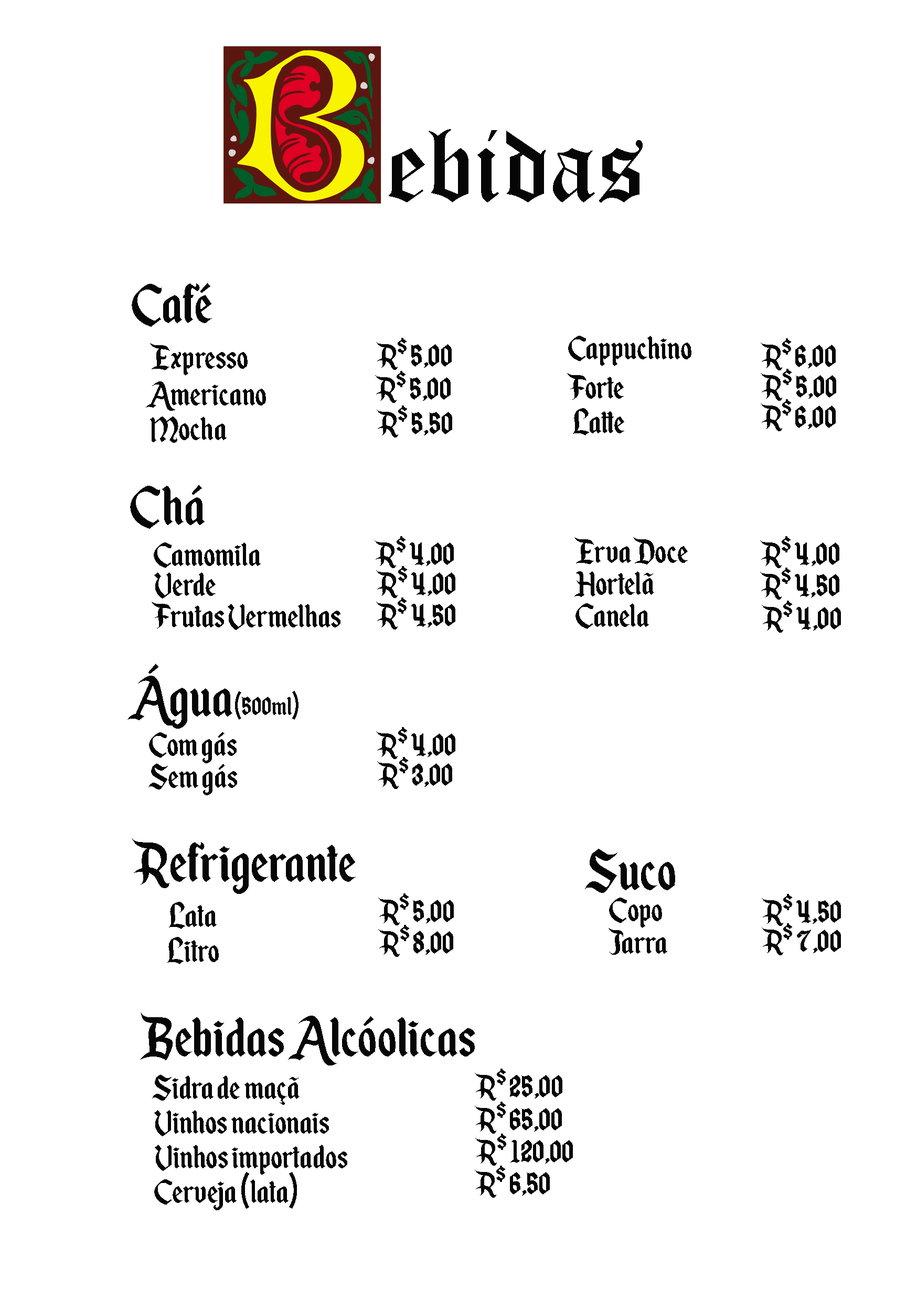
<style>
.page{position:relative;width:917px;height:1301px;background:#ffffff}
.page>*{position:absolute;margin:0}
.t1{font:104.9px "OldEnglishTextMT";color:#070606}
.t2{font:65.6px "EnchantedLand";color:#070606}
.t3{font:37.1px "EnchantedLand";color:#070606}
.t4{font:39.3px "EnchantedLand";color:#070606}
.t5{font:30.6px "EnchantedLand";color:#070606}
</style>
<div class="page">
<p class="t1" style="left:389px;top:129px;width:253px;height:73px">ebidas</p>
<p class="t2" style="left:132px;top:283px;width:80px;height:44px">Café</p>
<p class="t3" style="left:376px;top:338px;width:76px;height:32px">R$ 5,00</p>
<p class="t4" style="left:568px;top:336px;width:123px;height:30px">Cappuchino</p>
<p class="t3" style="left:760px;top:338px;width:75px;height:32px">R$ 6,00</p>
<p class="t4" style="left:150px;top:343px;width:98px;height:33px">Expresso</p>
<p class="t3" style="left:375px;top:371px;width:76px;height:32px">R$ 5,00</p>
<p class="t4" style="left:567px;top:373px;width:57px;height:27px">Forte</p>
<p class="t3" style="left:760px;top:369px;width:76px;height:32px">R$ 5,00</p>
<p class="t4" style="left:146px;top:381px;width:120px;height:30px">Americano</p>
<p class="t3" style="left:760px;top:399px;width:75px;height:32px">R$ 6,00</p>
<p class="t3" style="left:377px;top:405px;width:75px;height:32px">R$ 5,50</p>
<p class="t4" style="left:573px;top:408px;width:51px;height:27px">Latte</p>
<p class="t4" style="left:150px;top:416px;width:77px;height:27px">Mocha</p>
<p class="t2" style="left:130px;top:485px;width:75px;height:44px">Chá</p>
<p class="t4" style="left:154px;top:542px;width:107px;height:26px">Camomila</p>
<p class="t3" style="left:374px;top:536px;width:80px;height:32px">R$ 4,00</p>
<p class="t4" style="left:574px;top:537px;width:114px;height:27px">Erva Doce</p>
<p class="t3" style="left:760px;top:536px;width:79px;height:32px">R$ 4,00</p>
<p class="t3" style="left:376px;top:566px;width:79px;height:32px">R$ 4,00</p>
<p class="t3" style="left:760px;top:567px;width:79px;height:32px">R$ 4,50</p>
<p class="t4" style="left:154px;top:572px;width:62px;height:26px">Verde</p>
<p class="t4" style="left:574px;top:571px;width:80px;height:26px">Hortelã</p>
<p class="t4" style="left:152px;top:602px;width:188px;height:28px">Frutas Vermelhas</p>
<p class="t3" style="left:376px;top:597px;width:79px;height:32px">R$ 4,50</p>
<p class="t4" style="left:575px;top:603px;width:74px;height:26px">Canela</p>
<p class="t3" style="left:762px;top:601px;width:79px;height:32px">R$ 4,00</p>
<p class="t2" style="left:127px;top:663px;width:105px;height:65px">Água</p>
<p class="t5" style="left:235px;top:691px;width:63px;height:29px">(500ml)</p>
<p class="t4" style="left:149px;top:732px;width:88px;height:31px">Com gás</p>
<p class="t3" style="left:376px;top:727px;width:79px;height:32px">R$ 4,00</p>
<p class="t3" style="left:377px;top:757px;width:75px;height:32px">R$ 3,00</p>
<p class="t4" style="left:148px;top:763px;width:89px;height:32px">Sem gás</p>
<p class="t2" style="left:132px;top:838px;width:224px;height:56px">Refrigerante</p>
<p class="t2" style="left:585px;top:849px;width:90px;height:44px">Suco</p>
<p class="t3" style="left:378px;top:893px;width:76px;height:32px">R$ 5,00</p>
<p class="t3" style="left:762px;top:894px;width:79px;height:32px">R$ 4,50</p>
<p class="t4" style="left:169px;top:902px;width:48px;height:27px">Lata</p>
<p class="t4" style="left:609px;top:897px;width:53px;height:31px">Copo</p>
<p class="t3" style="left:378px;top:925px;width:75px;height:32px">R$ 8,00</p>
<p class="t4" style="left:608px;top:928px;width:59px;height:27px">Jarra</p>
<p class="t3" style="left:762px;top:923px;width:79px;height:32px">R$ 7,00</p>
<p class="t4" style="left:167px;top:937px;width:52px;height:27px">Litro</p>
<p class="t2" style="left:140px;top:1012px;width:335px;height:53px">Bebidas Alcóolicas</p>
<p class="t3" style="left:475px;top:1068px;width:87px;height:32px">R$ 25,00</p>
<p class="t4" style="left:152px;top:1074px;width:147px;height:31px">Sidra de maçã</p>
<p class="t4" style="left:154px;top:1110px;width:175px;height:26px">Vinhos nacionais</p>
<p class="t3" style="left:475px;top:1101px;width:87px;height:32px">R$ 65,00</p>
<p class="t3" style="left:475px;top:1133px;width:98px;height:32px">R$ 120,00</p>
<p class="t4" style="left:155px;top:1144px;width:192px;height:31px">Vinhos importados</p>
<p class="t3" style="left:475px;top:1165px;width:75px;height:32px">R$ 6,50</p>
<p class="t4" style="left:154px;top:1172px;width:143px;height:38px">Cerveja (lata)</p>
</div>
